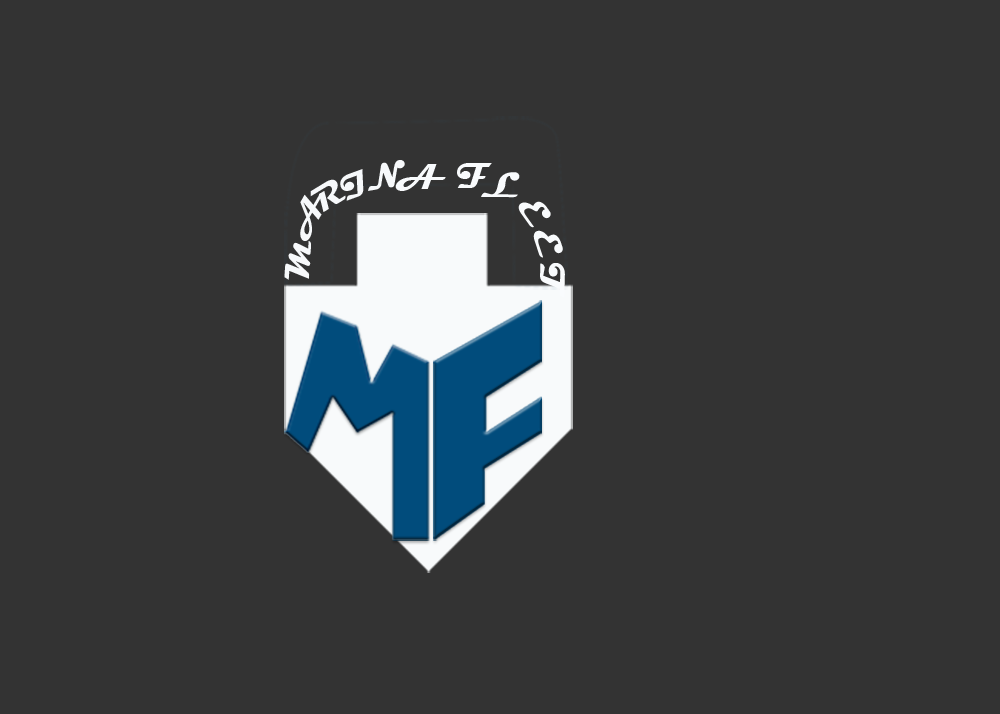
<style>
.page{position:relative;width:1000px;height:714px;background:#333333}
.page>*{position:absolute;margin:0}
.t1{font:35.7px "Magneto-Bold";color:#f7f9fb}
.t2{font:35.7px "Magneto-Bold";color:#f9fbfd}
</style>
<div class="page">
<p class="t1" style="left:368px;top:160px;width:37px;height:31px;rotate:-10deg">N</p>
<p class="t1" style="left:340px;top:169px;width:24px;height:32px;rotate:-20deg">I</p>
<p class="t2" style="left:395px;top:164px;width:51px;height:27px">A</p>
<p class="t2" style="left:457px;top:163px;width:35px;height:25px">F</p>
<p class="t2" style="left:481px;top:172px;width:39px;height:26px">L</p>
<p class="t1" style="left:310px;top:179px;width:36px;height:33px;rotate:-31deg">R</p>
<p class="t1" style="left:300px;top:193px;width:22px;height:48px;rotate:-60deg">A</p>
<p class="t2" style="left:518px;top:201px;width:33px;height:27px;rotate:55deg">E</p>
<p class="t2" style="left:533px;top:230px;width:30px;height:28px;rotate:72deg">E</p>
<p class="t1" style="left:284px;top:241px;width:27px;height:39px;rotate:-86deg">M</p>
<p class="t2" style="left:540px;top:263px;width:25px;height:35px;rotate:92deg">T</p>
</div>
